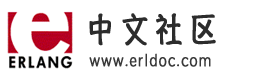
<style>
.page{position:relative;width:262px;height:76px;background:#ffffff}
.page>*{position:absolute;margin:0}
.t1{font:33.6px "HannotateSC-W7";letter-spacing:0.2em;color:#2c2c2c;font-weight:bold;scale:0.83 1}
.t2{font:16.8px "STYuanti-SC-Regular";letter-spacing:0.075em;color:#393939;font-weight:bold;scale:0.83 1}
</style>
<div class="page">
<p class="t1" style="left:89px;top:13px;width:127px;height:33px">中文社区</p>
<p class="t2" style="left:89px;top:53px;width:122px;height:14px">www.erldoc.com</p>
</div>
